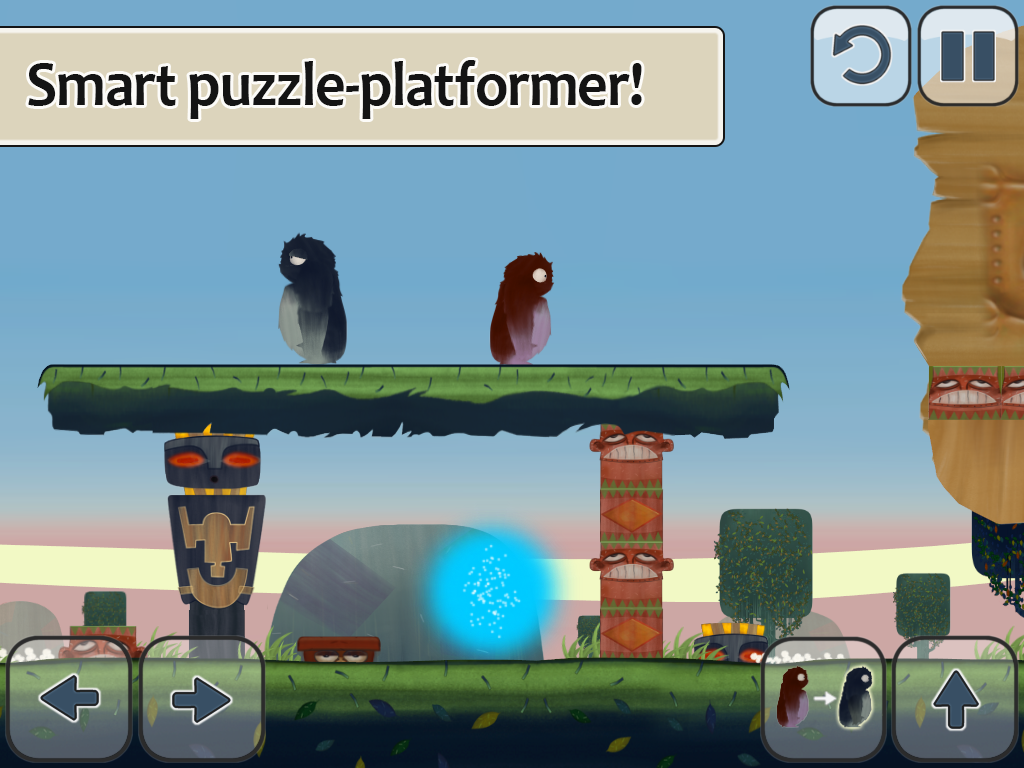
<style>
.page{position:relative;width:1024px;height:768px}
.page>*{position:absolute;margin:0}
.t1{font:63.6px "Candara-Bold";letter-spacing:-0.02em;color:#141414;scale:0.94 1}
</style>
<div class="page">
<p class="t1" style="left:28px;top:60px;width:614px;height:59px">Smart puzzle-platformer!</p>
</div>
